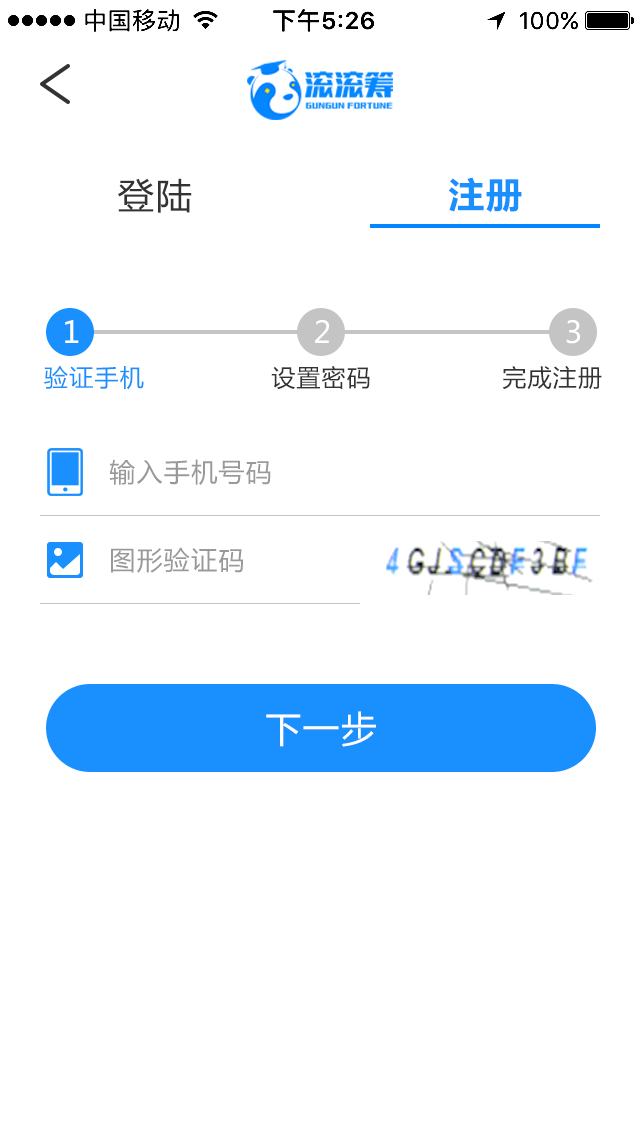
<style>
.page{position:relative;width:640px;height:1136px;background:#ffffff}
.page>*{position:absolute;margin:0}
.t1{font:35.4px "MicrosoftYaHei";letter-spacing:0.05em;color:#333333}
.t2{font:35.4px "MicrosoftYaHei-Bold";letter-spacing:0.05em;color:#1990fe}
.t3{font:30.1px "MicrosoftYaHei";letter-spacing:0.05em;color:#ffffff}
.t4{font:24.1px "MicrosoftYaHei";letter-spacing:0.05em;color:#1990fe}
.t5{font:24.1px "MicrosoftYaHei";letter-spacing:0.05em;color:#333333}
.t6{font:26px "MicrosoftYaHei";letter-spacing:0.05em;color:#999999}
.t7{font:36px "MicrosoftYaHei";letter-spacing:0.05em;color:#ffffff}
</style>
<div class="page">
<p class="t1" style="left:118px;top:178px;width:74px;height:35px">登陆</p>
<p class="t2" style="left:448px;top:177px;width:74px;height:35px">注册</p>
<p class="t3" style="left:65px;top:319px;width:14px;height:24px">1</p>
<p class="t3" style="left:315px;top:320px;width:14px;height:23px">2</p>
<p class="t3" style="left:566px;top:320px;width:14px;height:24px">3</p>
<p class="t4" style="left:44px;top:366px;width:100px;height:24px">验证手机</p>
<p class="t5" style="left:271px;top:366px;width:99px;height:24px">设置密码</p>
<p class="t5" style="left:502px;top:366px;width:100px;height:24px">完成注册</p>
<p class="t6" style="left:109px;top:459px;width:162px;height:26px">输入手机号码</p>
<p class="t6" style="left:111px;top:547px;width:133px;height:26px">图形验证码</p>
<p class="t7" style="left:266px;top:711px;width:110px;height:36px">下一步</p>
</div>
